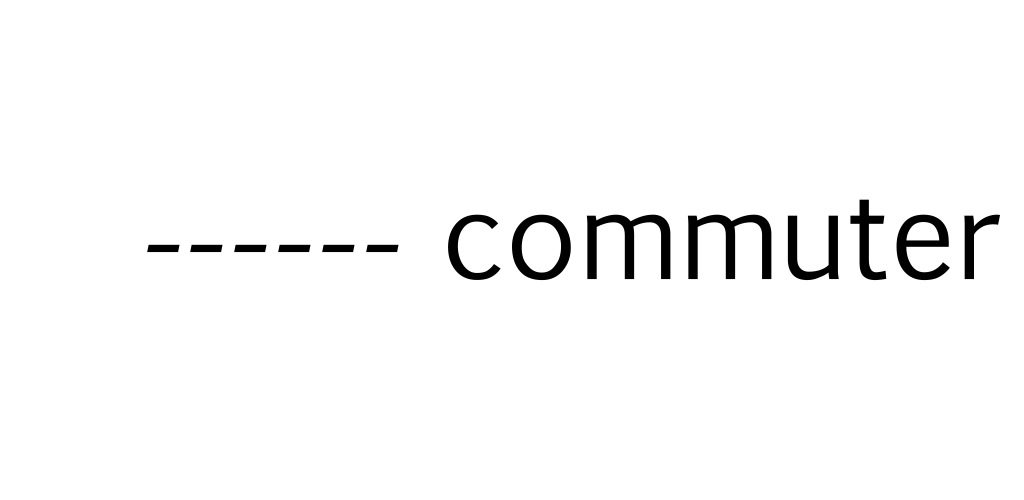
<style>
.page{position:relative;width:1024px;height:500px;background:#ffffff}
.page>*{position:absolute;margin:0}
.t1{font:120px "EuphemiaUCAS";color:#000000}
</style>
<div class="page">
<p class="t1" style="left:448px;top:199px;width:552px;height:82px">commuter</p>
<p class="t1" style="left:147px;top:244px;width:252px;height:9px">------</p>
</div>
